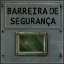
<style>
.page{position:relative;width:64px;height:64px}
.page>*{position:absolute;margin:0}
.t1{font:10px/10px "LucidaConsole";color:#000000;font-weight:bold;scale:0.81 1}
.t2{font:10px/10px "LucidaConsole";letter-spacing:-0.06em;color:#000000;font-weight:bold;scale:0.81 1}
</style>
<div class="page">
<p class="t1" style="left:7px;top:7px;width:52px;height:20px;text-align:center">BARREIRA <span class="t2">DE<br></span>SEGURANÇA</p>
</div>
